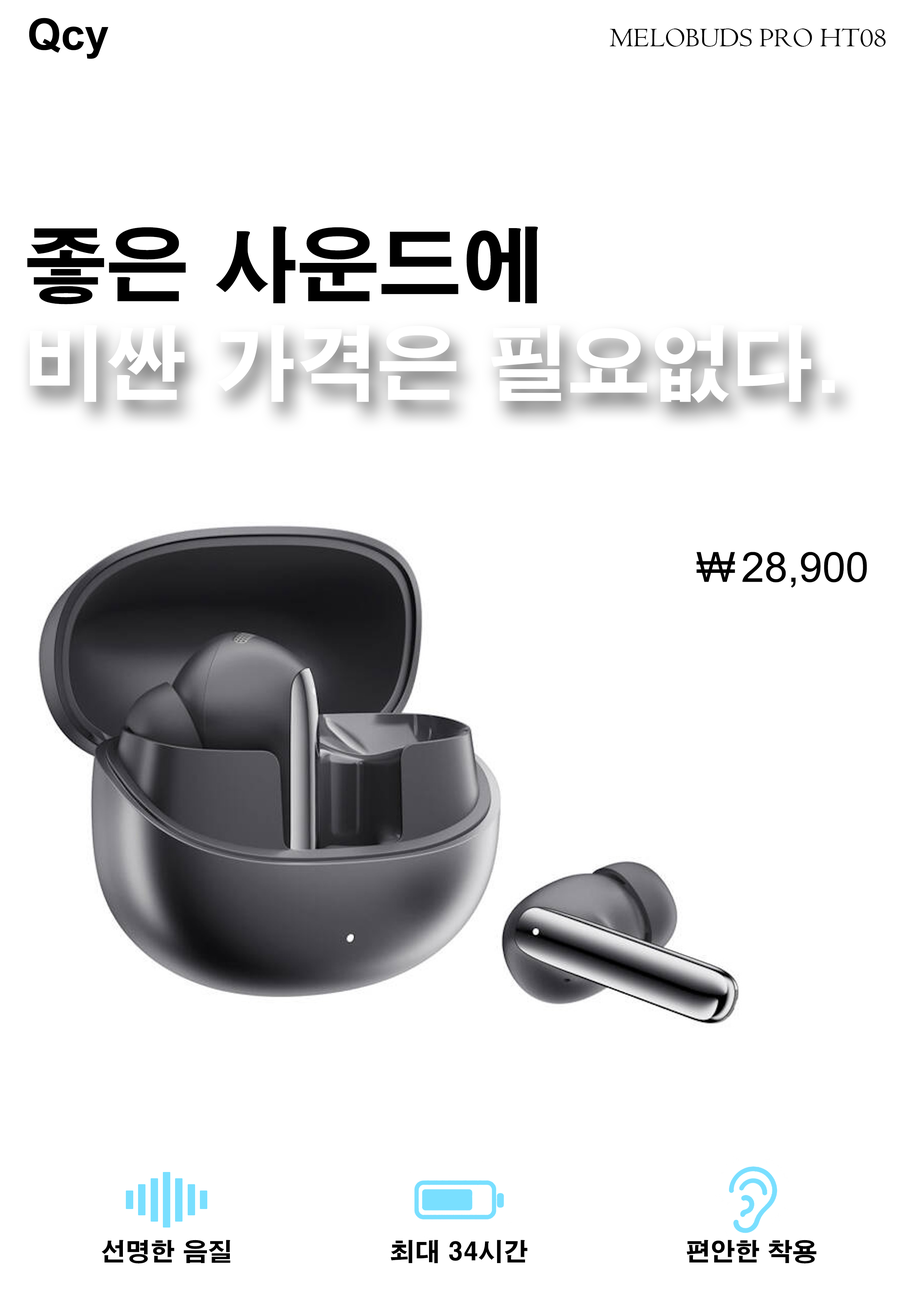
<style>
.page{position:relative;width:918px;height:1299px;background:#ffffff}
.page>*{position:absolute;margin:0}
.t1{font:43.2px "Arial-BoldMT";color:#000000}
.t2{font:27.8px "Centaur";color:#000000}
.t3{font:81.8px "H2gtrE";color:#000000}
.t4{font:81.8px "H2gtrE";color:#ffffff}
.t5{font:41.6px "ArialMT";color:#000000}
.t6{font:24.7px "H2gtrE";color:#000000}
</style>
<div class="page">
<p class="t1" style="left:29px;top:18px;width:79px;height:41px">Qcy</p>
<p class="t2" style="left:610px;top:28px;width:276px;height:19px">MELOBUDS PRO HT08</p>
<p class="t3" style="left:27px;top:226px;width:511px;height:78px">좋은 사운드에</p>
<p class="t4" style="left:30px;top:325px;width:805px;height:78px">비싼 가격은 필요없다.</p>
<p class="t5" style="left:696px;top:552px;width:171px;height:36px">₩ 28,900</p>
<p class="t6" style="left:101px;top:1240px;width:129px;height:23px">선명한 음질</p>
<p class="t6" style="left:391px;top:1240px;width:137px;height:23px">최대 34시간</p>
<p class="t6" style="left:687px;top:1240px;width:130px;height:23px">편안한 착용</p>
</div>
